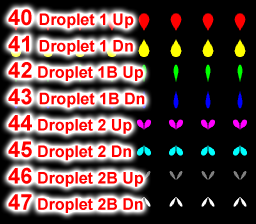
<style>
.page{position:relative;width:256px;height:224px;background:#000000}
.page>*{position:absolute;margin:0}
.t1{font:16px "Arial-BoldMT";color:#ff0000}
.t2{font:22px "Arial-BoldMT";color:#ff0000}
</style>
<div class="page">
<p class="t1" style="left:8px;top:9px;width:137px;height:204px"><span class="t2">40 </span>Droplet 1 Up<br><span class="t2">41 </span>Droplet 1 Dn<br><span class="t2">42</span> Droplet 1B Up<br><span class="t2">43 </span>Droplet 1B Dn<br><span class="t2">44</span> Droplet 2 Up<br><span class="t2">45</span> Droplet 2 Dn<br><span class="t2">46</span> Droplet 2B Up<br><span class="t2">47</span> Droplet 2B Dn</p>
</div>
